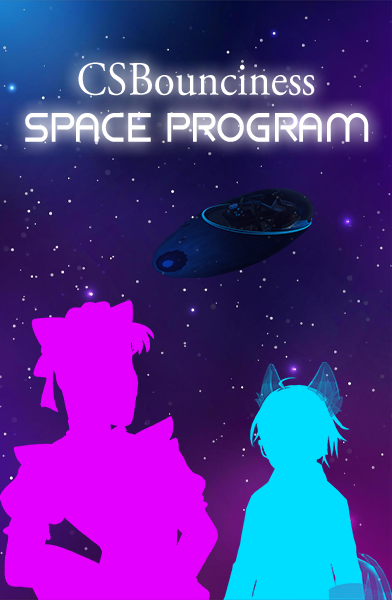
<style>
.page{position:relative;width:392px;height:600px}
.page>*{position:absolute;margin:0}
.t1{font:47.4px "AGaramondPro-Regular";color:#ffffff;scale:0.91 1}
.t2{font:42px "AlienWorld";color:#ffffff;scale:0.91 1}
</style>
<div class="page">
<p class="t1" style="left:78px;top:62px;width:237px;height:34px">CSBounciness</p>
<p class="t2" style="left:25px;top:112px;width:344px;height:30px">SPACE PROGRAM</p>
</div>
